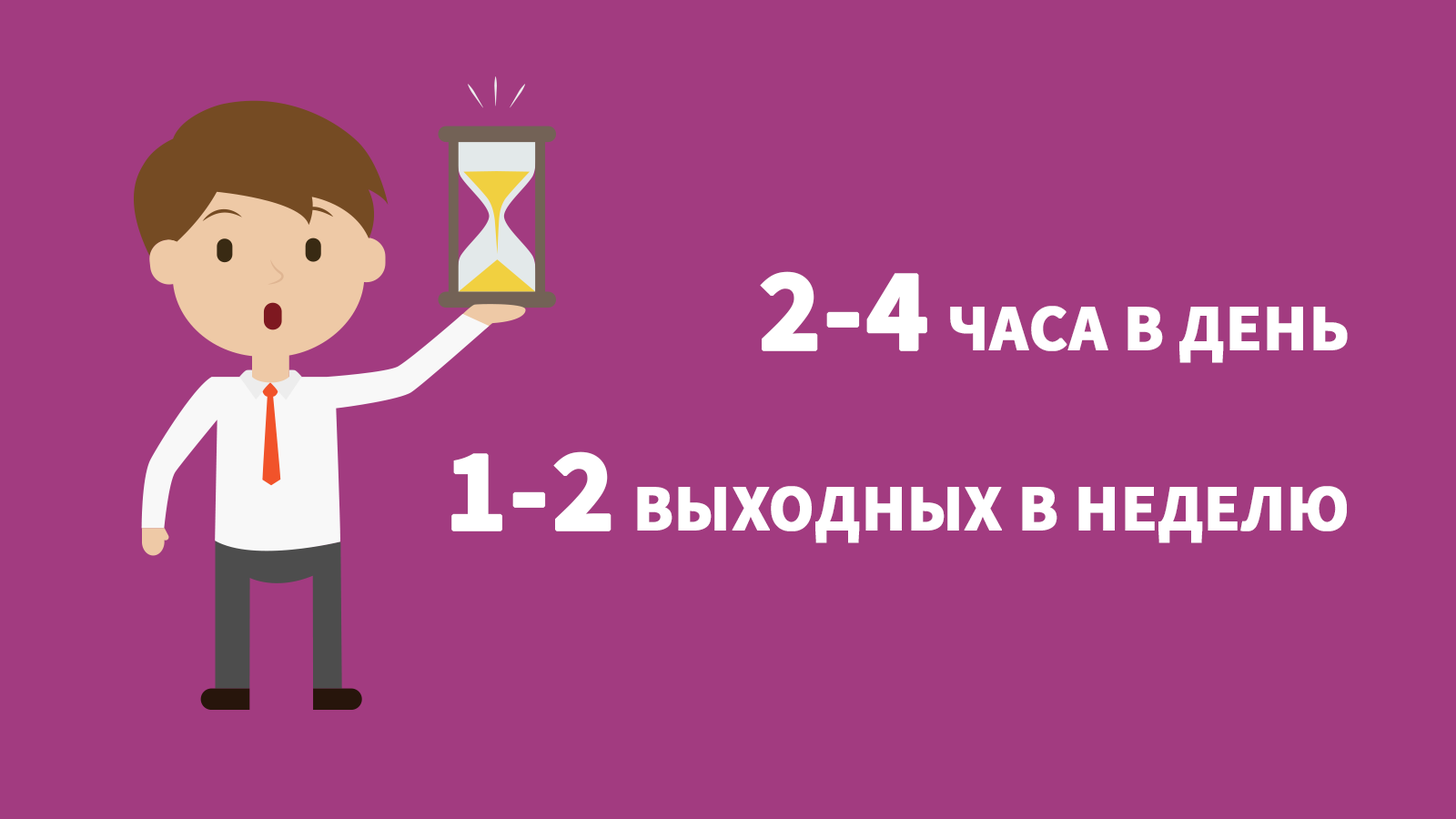
<style>
.page{position:relative;width:1456px;height:819px;background:#a23b80}
.page>*{position:absolute;margin:0}
.t1{font:65.5px "SourceSansPro-Bold";color:#ffffff;text-transform:uppercase;font-weight:bold}
.t2{font:117.4px "SourceSansPro-Bold";color:#ffffff;text-transform:uppercase;font-weight:bold}
</style>
<div class="page">
<p class="t1" style="left:760px;top:271px;width:588px;height:92px"><span class="t2">2-4</span> часа в день</p>
<p class="t1" style="left:451px;top:451px;width:896px;height:92px"><span class="t2">1-2</span> выходных в неделю</p>
</div>
